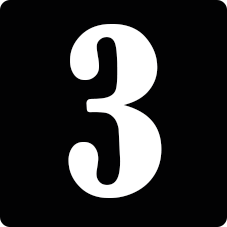
<style>
.page{position:relative;width:227px;height:227px;background:#020203}
.page>*{position:absolute;margin:0}
.t1{font:216px "BernardMT-Condensed";color:#ffffff}
</style>
<div class="page">
<p class="t1" style="left:68px;top:24px;width:94px;height:174px">3</p>
</div>
